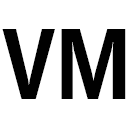
<style>
.page{position:relative;width:128px;height:128px;background:#ffffff}
.page>*{position:absolute;margin:0}
.t1{font:100px "Gadugi-Bold";color:#010101;scale:0.8 1}
</style>
<div class="page">
<p class="t1" style="left:2px;top:29px;width:124px;height:70px">VM</p>
</div>
